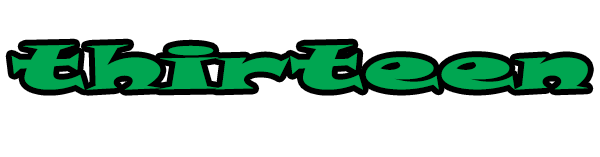
<style>
.page{position:relative;width:600px;height:157px;background:#ffffff}
.page>*{position:absolute;margin:0}
.t1{font:60px "SnapITC-Regular";color:#00a651;scale:2 1}
</style>
<div class="page">
<p class="t1" style="left:11px;top:44px;width:577px;height:46px">thirteen</p>
</div>
